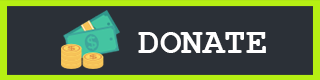
<style>
.page{position:relative;width:320px;height:80px;background:#2b3037}
.page>*{position:absolute;margin:0}
.t1{font:36px "CourierNewPS-BoldMT";color:#ffffff}
</style>
<div class="page">
<p class="t1" style="left:138px;top:32px;width:128px;height:21px">DONATE</p>
</div>
